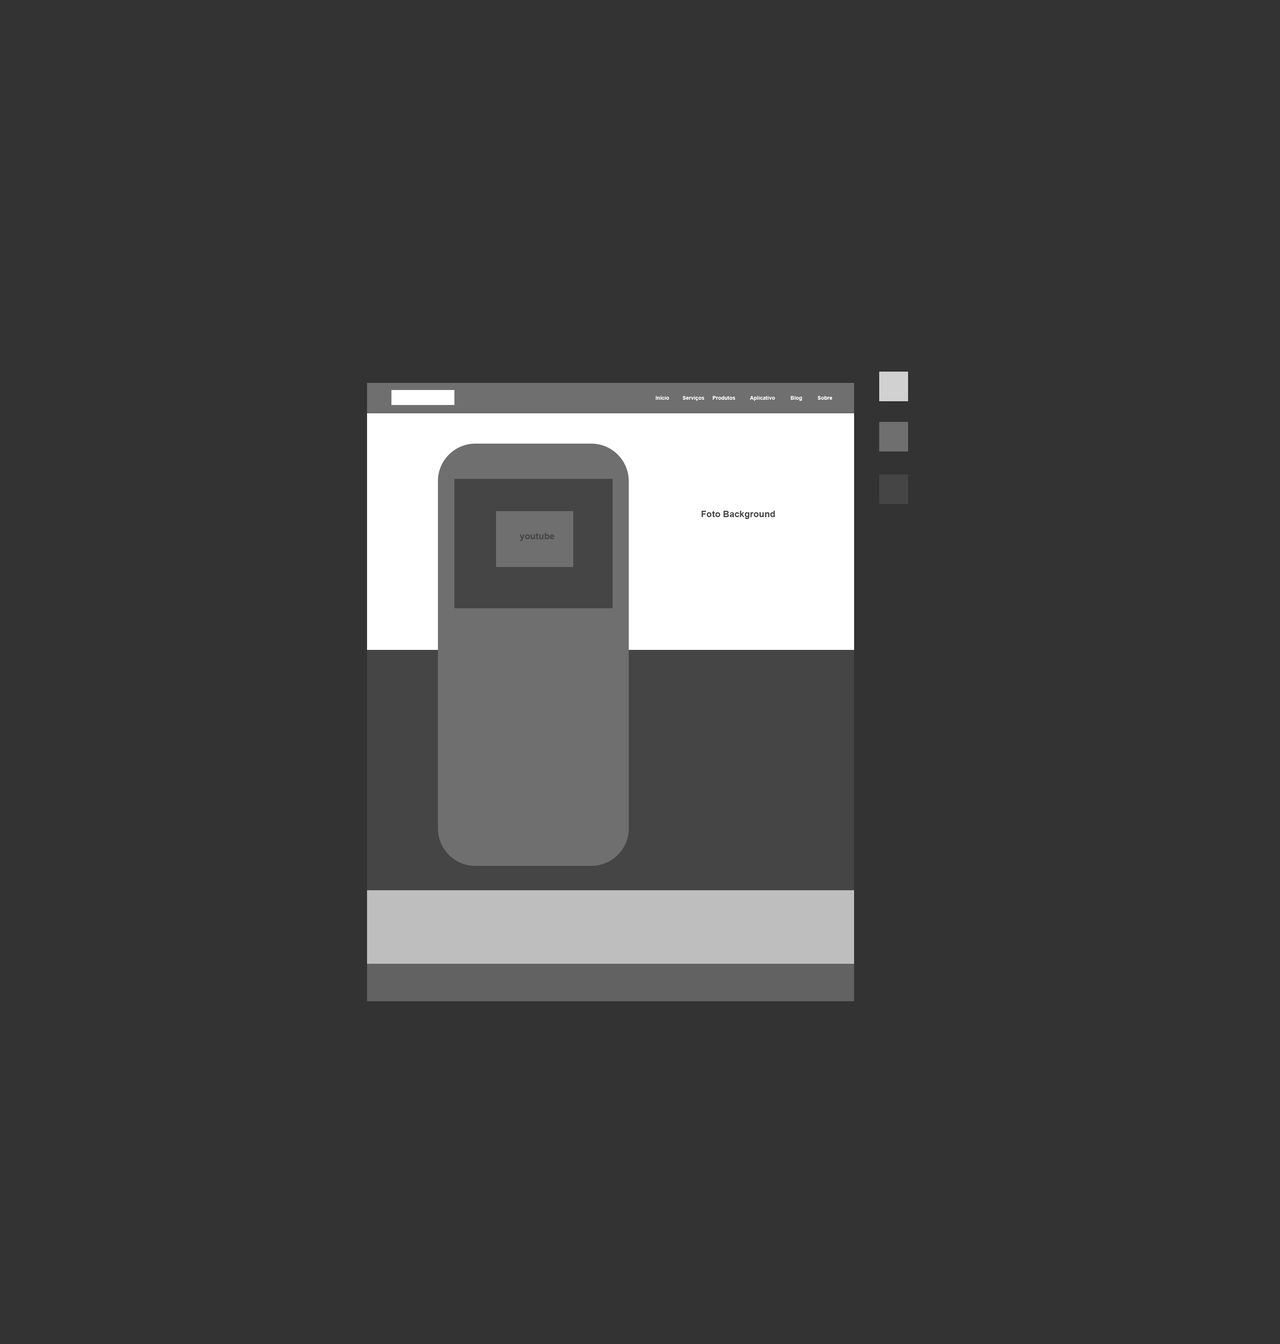
<style>
.page{position:relative;width:1280px;height:1344px;background:#333333}
.page>*{position:absolute;margin:0}
.t1{font:5.2px "Arial-BoldMT";color:#ffffff}
.t2{font:9px "Arial-BoldMT";color:#454545}
</style>
<div class="page">
<p class="t1" style="left:656px;top:396px;width:176px;height:5px">Início   Serviços     Produtos   Aplicativo   Blog    Sobre</p>
<p class="t2" style="left:702px;top:511px;width:73px;height:8px">Foto Background</p>
<p class="t2" style="left:520px;top:533px;width:35px;height:8px">youtube</p>
</div>
